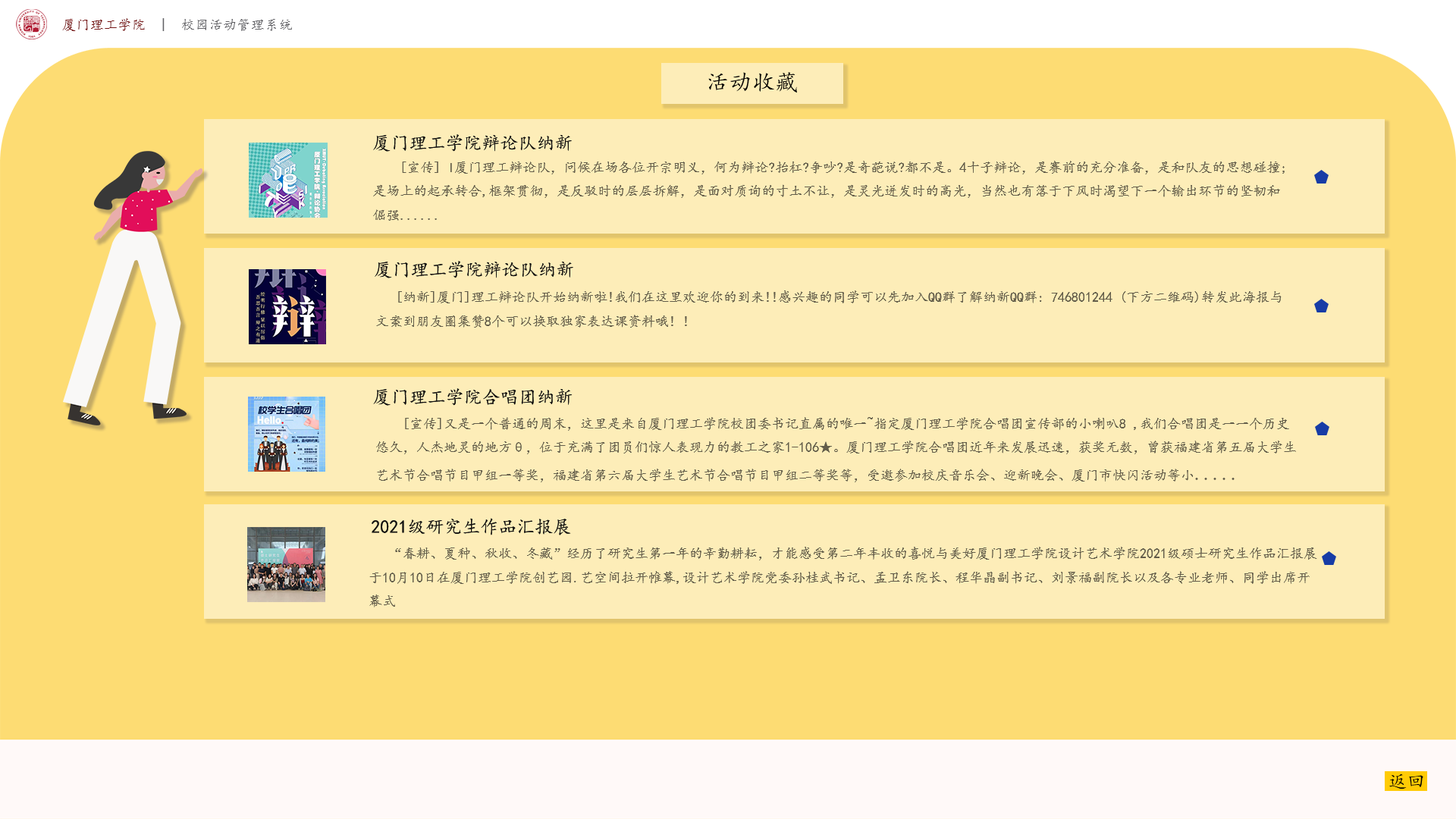
<style>
.page{position:relative;width:1456px;height:819px;background:#fdedb8}
.page>*{position:absolute;margin:0}
.t1{font:13.6px "KaiTi";letter-spacing:0.02em;color:#626266}
.t2{font:13.6px "KaiTi";letter-spacing:0.02em;color:#771515}
.t3{font:22.7px "KaiTi";letter-spacing:0.02em;color:#000000}
.t4{font:18.2px "KaiTi";color:#10100f}
.t5{font:13.6px "KaiTi";color:#635d4a}
.t6{font:18.2px "KaiTi";color:#635d4a}
.t7{font:18.2px "KaiTi";letter-spacing:0.02em;color:#000000}
</style>
<div class="page">
<p class="t1" style="left:62px;top:18px;width:230px;height:13px"><span class="t2">厦门理工学院</span>  |  校园活动管理系统</p>
<p class="t3" style="left:708px;top:72px;width:89px;height:21px">活动收藏</p>
<p class="t4" style="left:373px;top:134px;width:199px;height:18px">厦门理工学院辩论队纳新</p>
<p class="t5" style="left:373px;top:161px;width:912px;height:60px">[宣传] I厦门理工辩论队，问候在场各位开宗明义，何为辩论?抬杠?争吵?是奇葩说?都不是。4十子辩论，是赛前的充分准备，是和队友的思想碰撞;<br>是场上的起承转合,框架贯彻，是反驳时的层层拆解，是面对质询的寸土不让，是灵光迸发时的高光，当然也有落于下风时渴望下一个输出环节的坚韧和<br>倔强......</p>
<p class="t4" style="left:375px;top:261px;width:198px;height:17px">厦门理工学院辩论队纳新</p>
<p class="t5" style="left:376px;top:290px;width:906px;height:38px">[纳新]厦门]理工辩论队开始纳新啦!我们在这里欢迎你的到来!!感兴趣的同学可以先加入QQ群了解纳新QQ群: 746801244 (下方二维码)转发此海报与<br>文案到朋友圈集赞8个可以换取独家表达课资料哦! !</p>
<p class="t4" style="left:373px;top:388px;width:200px;height:18px">厦门理工学院合唱团纳新</p>
<p class="t5" style="left:376px;top:417px;width:920px;height:65px">[宣传]又是一个普通的周末，这里是来自厦门理工学院校团委书记直属的唯一~指定厦门理工学院合唱团宣传部的小喇叭8 ,我们合唱团是一一个历史<br>悠久，人杰地灵的地方θ，位于充满了团员们惊人表现力的教工之家1-106★。厦门理工学院合唱团近年来发展迅速，获奖无数，曾获福建省第五届大学生<br>艺术节合唱节目甲组一等奖，福建省第六届大学生艺术节合唱节目甲组二等奖等，受邀参加校庆音乐会、迎新晚会、厦门市快闪活动等小<span class="t6">.....</span></p>
<p class="t4" style="left:372px;top:518px;width:199px;height:17px">2021级研究生作品汇报展</p>
<p class="t5" style="left:369px;top:547px;width:948px;height:60px">“春耕、夏种、秋收、冬藏”经历了研究生第一年的辛勤耕耘，才能感受第二年丰收的喜悦与美好厦门理工学院设计艺术学院2021级硕士研究生作品汇报展<br>于10月10日在厦门理工学院创艺园.艺空间拉开帷幕,设计艺术学院党委孙桂武书记、孟卫东院长、程华晶副书记、刘景福副院长以及各专业老师、同学出席开<br>幕式</p>
<p class="t7" style="left:1389px;top:773px;width:34px;height:16px">返回</p>
</div>
